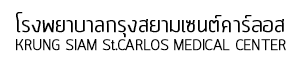
<style>
.page{position:relative;width:288px;height:70px;background:#ffffff}
.page>*{position:absolute;margin:0}
.t1{font:15px "Quark-Light";color:#000000;font-weight:bold}
.t2{font:24px "Quark-Light";color:#000000;font-weight:bold}
</style>
<div class="page">
<p class="t1" style="left:16px;top:12px;width:270px;height:39px"><span class="t2">โรงพยาบาลกรุงสยามเซนต์คาร์ลอส<br></span>KRUNG SIAM St.CARLOS MEDICAL CENTER</p>
</div>
